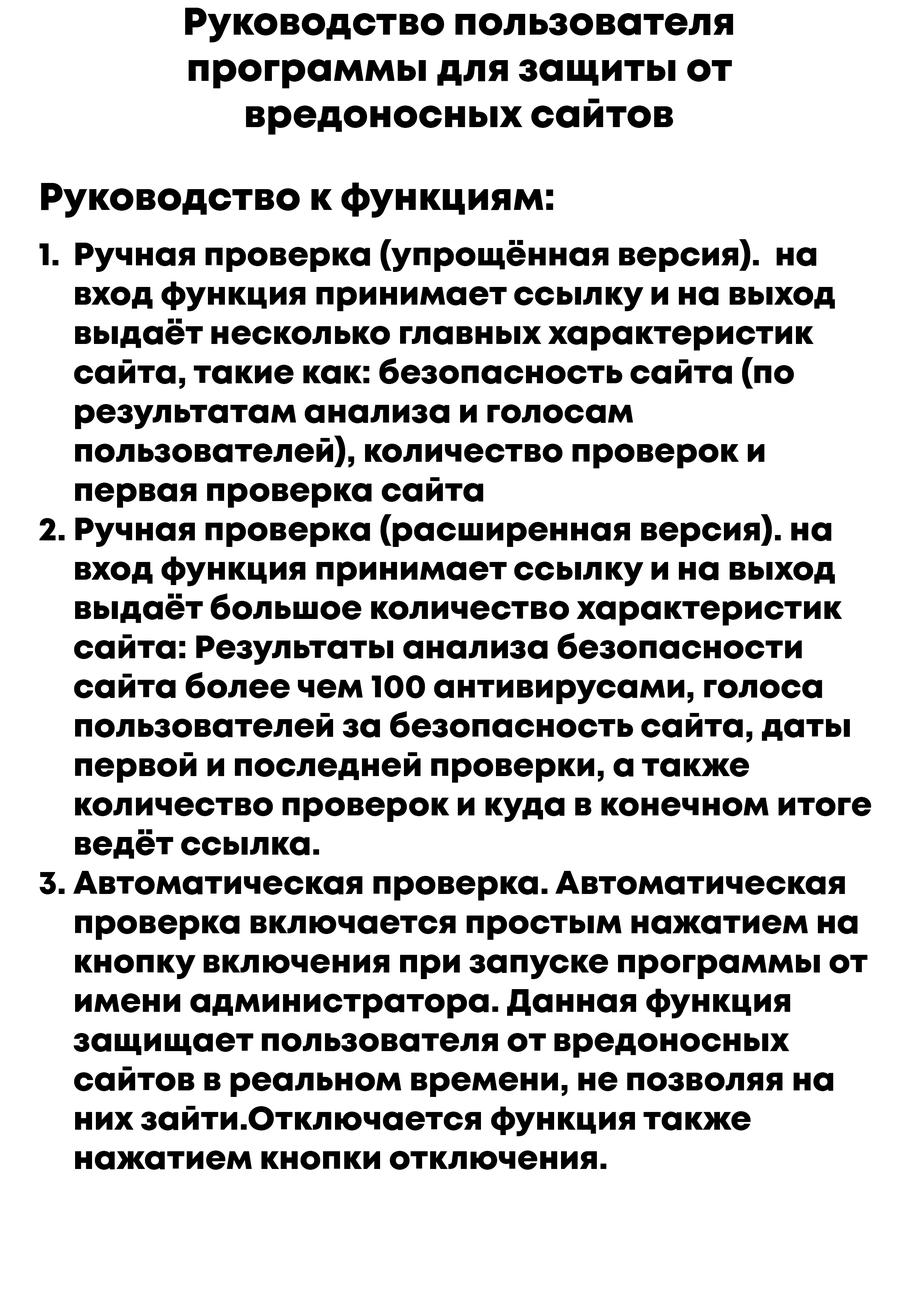
<style>
.page{position:relative;width:918px;height:1298px;background:#ffffff}
.page>*{position:absolute;margin:0}
.t1{font:38.5px "Mont-HeavyDEMO";color:#000000}
.t2{font:32.7px "Mont-HeavyDEMO";color:#000000}
</style>
<div class="page">
<p class="t1" style="left:185px;top:8px;width:549px;height:127px;text-align:center">Руководство пользователя программы для защиты от вредоносных сайтов</p>
<p class="t1" style="left:41px;top:183px;width:513px;height:35px">Руководство к функциям:</p>
<p class="t2" style="left:39px;top:239px;width:833px;height:931px">Ручная проверка (упрощённая версия).  на вход функция принимает ссылку и на выход выдаёт несколько главных характеристик сайта, такие как: безопасность сайта (по результатам анализа и голосам пользователей), количество проверок и первая проверка сайта<br>Ручная проверка (расширенная версия). на вход функция принимает ссылку и на выход выдаёт большое количество характеристик сайта: Результаты анализа безопасности сайта более чем 100 антивирусами, голоса пользователей за безопасность сайта, даты первой и последней проверки, а также количество проверок и куда в конечном итоге ведёт ссылка.<br>Автоматическая проверка. Автоматическая проверка включается простым нажатием на кнопку включения при запуске программы от имени администратора. Данная функция защищает пользователя от вредоносных сайтов в реальном времени, не позволяя на них зайти.Отключается функция также нажатием кнопки отключения.</p>
</div>
